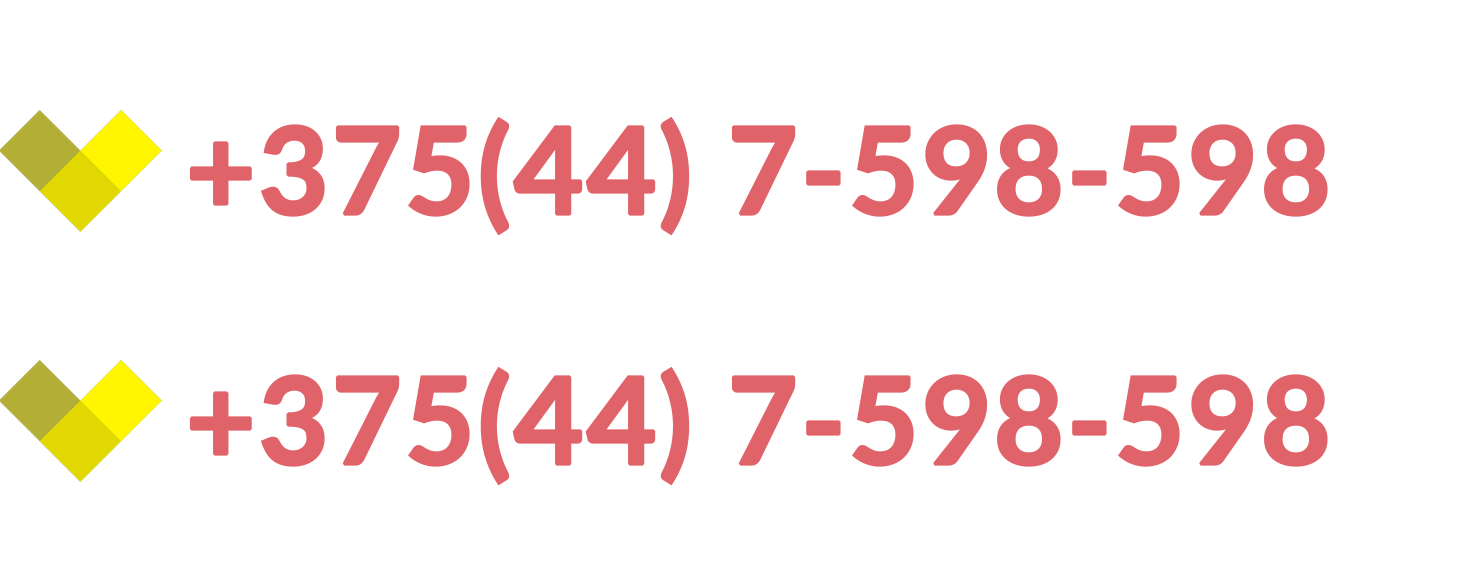
<style>
.page{position:relative;width:1464px;height:562px;background:#ffffff}
.page>*{position:absolute;margin:0}
.t1{font:120px "Lato-Bold";color:#e06369;font-weight:bold}
</style>
<div class="page">
<p class="t1" style="left:189px;top:116px;width:1139px;height:120px">+375(44) 7-598-598</p>
<p class="t1" style="left:189px;top:366px;width:1139px;height:120px">+375(44) 7-598-598</p>
</div>
